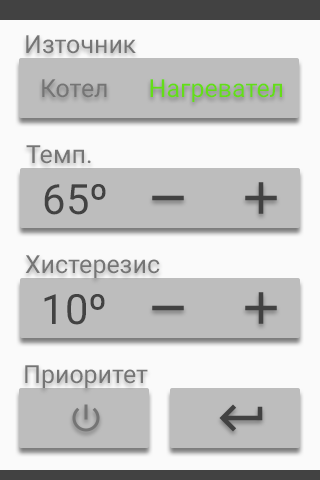
<style>
.page{position:relative;width:320px;height:480px;background:#fafafa}
.page>*{position:absolute;margin:0}
.t1{font:25px "Roboto-Regular";color:#757575}
.t2{font:25px "Roboto-Regular";color:#64dd17}
.t3{font:41.7px "Roboto-Regular";color:#424242}
</style>
<div class="page">
<p class="t1" style="left:26px;top:35px;width:110px;height:19px">Източник</p>
<p class="t1" style="left:42px;top:79px;width:65px;height:19px">Котел</p>
<p class="t2" style="left:150px;top:79px;width:132px;height:23px">Нагревател</p>
<p class="t1" style="left:26px;top:145px;width:65px;height:19px">Темп.</p>
<p class="t3" style="left:44px;top:184px;width:62px;height:31px">65º</p>
<p class="t1" style="left:25px;top:255px;width:135px;height:23px">Хистерезис</p>
<p class="t3" style="left:44px;top:294px;width:61px;height:31px">10º</p>
<p class="t1" style="left:25px;top:365px;width:123px;height:23px">Приоритет</p>
</div>
